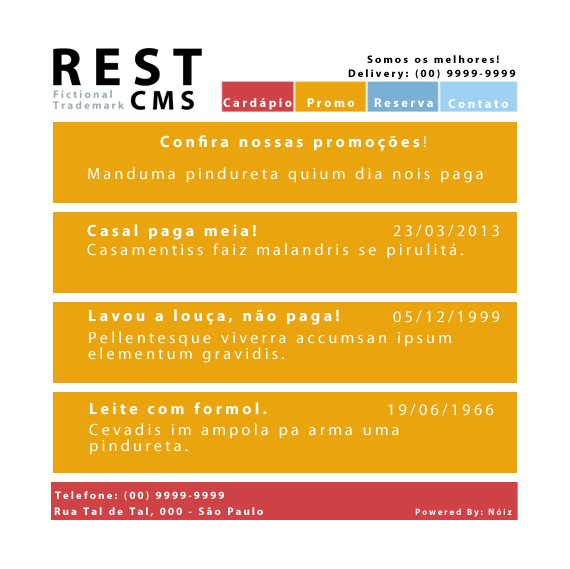
<style>
.page{position:relative;width:570px;height:569px;background:#ffffff}
.page>*{position:absolute;margin:0}
.t1{font:10.8px "MyriadPro-Bold";letter-spacing:0.2em;color:#000000}
.t2{font:12.6px "MyriadPro-Bold";letter-spacing:0.2em;color:#ffffff}
.t3{font:16.2px "MyriadPro-Bold";letter-spacing:0.2em;color:#ffffff}
.t4{font:16.2px "MyriadPro-Regular";letter-spacing:0.2em;color:#ffffff}
.t5{font:16.2px/8.1px "MyriadPro-Regular";letter-spacing:0.2em;color:#ffffff}
.t6{font:10.8px "MyriadPro-Bold";letter-spacing:0.2em;color:#ffffff}
.t7{font:9px "MyriadPro-Bold";letter-spacing:0.2em;color:#ffffff}
</style>
<div class="page">
<p class="t1" style="left:367px;top:55px;width:132px;height:8px">Somos os melhores!</p>
<p class="t1" style="left:348px;top:69px;width:168px;height:11px">Delivery: (00) 9999-9999</p>
<p class="t2" style="left:223px;top:98px;width:69px;height:12px">Cardápio</p>
<p class="t2" style="left:307px;top:98px;width:47px;height:9px">Promo</p>
<p class="t2" style="left:374px;top:98px;width:59px;height:9px">Reserva</p>
<p class="t2" style="left:448px;top:99px;width:60px;height:9px">Contato</p>
<p class="t3" style="left:160px;top:135px;width:266px;height:16px">Confira nossas promoções<span class="t4">!</span></p>
<p class="t4" style="left:88px;top:167px;width:395px;height:16px">Manduma pindureta quium dia nois paga</p>
<p class="t3" style="left:87px;top:224px;width:169px;height:16px">Casal paga meia!</p>
<p class="t4" style="left:393px;top:224px;width:106px;height:13px">23/03/2013</p>
<p class="t4" style="left:87px;top:243px;width:376px;height:16px">Casamentiss faiz malandris se pirulitá.</p>
<p class="t3" style="left:89px;top:309px;width:250px;height:16px">Lavou a louça, não paga!</p>
<p class="t4" style="left:393px;top:310px;width:107px;height:13px">05/12/1999</p>
<p class="t5" style="left:88px;top:331px;width:363px;height:32px">Pellentesque viverra accumsan ipsum <br><br>elementum gravidis.</p>
<p class="t3" style="left:90px;top:402px;width:177px;height:13px">Leite com formol.</p>
<p class="t4" style="left:388px;top:403px;width:106px;height:13px">19/06/1966</p>
<p class="t5" style="left:89px;top:423px;width:310px;height:32px">Cevadis im ampola pa arma uma <br><br>pindureta.</p>
<p class="t6" style="left:55px;top:491px;width:169px;height:10px">Telefone: (00) 9999-9999</p>
<p class="t6" style="left:54px;top:507px;width:209px;height:10px">Rua Tal de Tal, 000 - São Paulo</p>
<p class="t7" style="left:415px;top:508px;width:97px;height:9px">Powered By: Nóiz</p>
</div>
